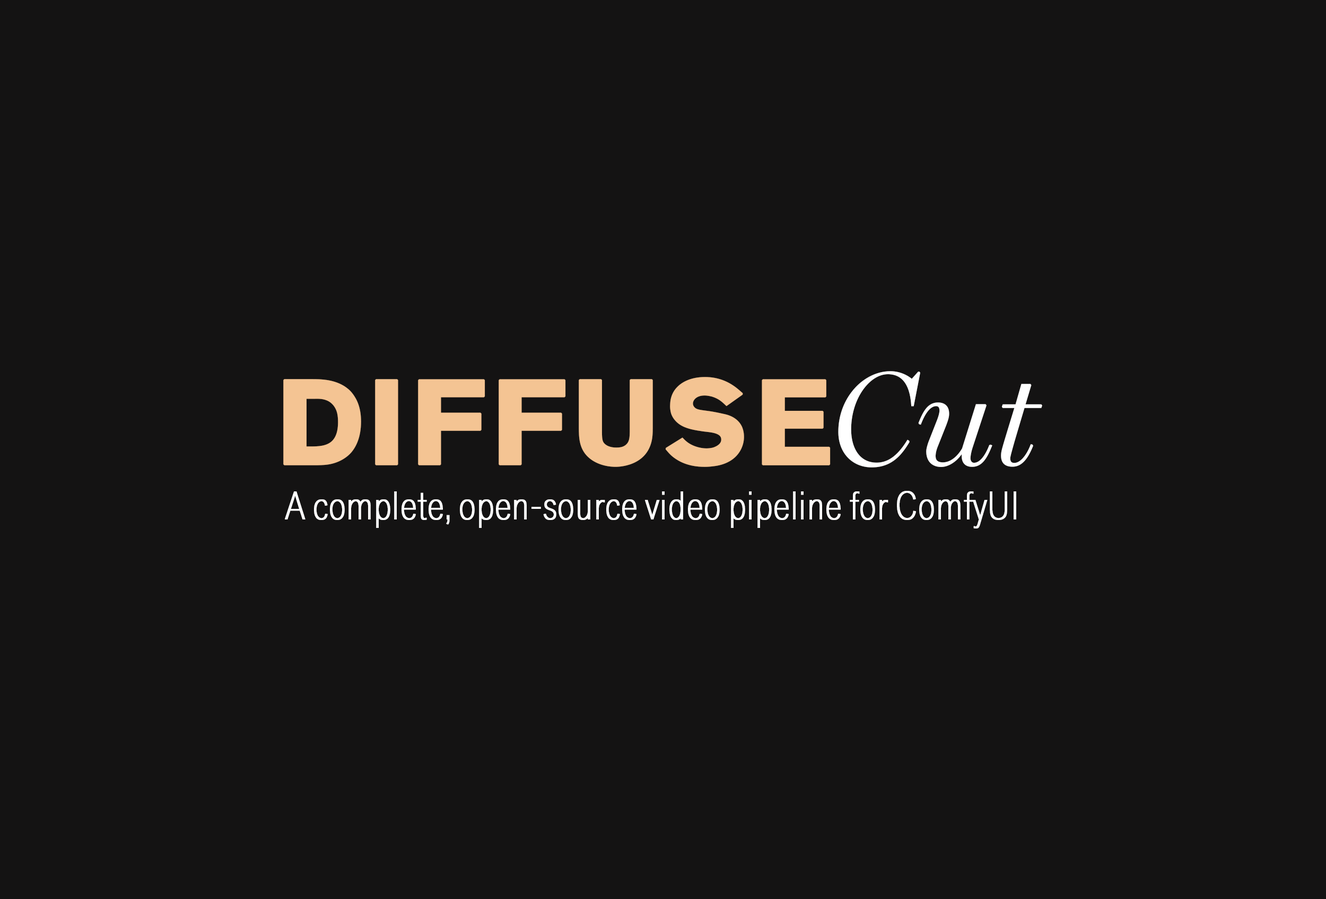
<style>
.page{position:relative;width:1326px;height:899px;background:#141313}
.page>*{position:absolute;margin:0}
.t1{font:119.7px "AkzidenzGroteskBQ-Bold";color:#f4c493;font-weight:bold}
.t2{font:132.6px "MillerBanner-LightItalic";color:#ffffff;font-weight:bold}
.t3{font:39.3px "AkzidGrtskNext-XLightCnd";color:#ffffff;font-weight:bold}
</style>
<div class="page">
<p class="t1" style="left:283px;top:371px;width:759px;height:97px">DIFFUSE<span class="t2">Cut</span></p>
<p class="t3" style="left:285px;top:491px;width:731px;height:38px">A complete, open-source video pipeline for ComfyUI</p>
</div>
